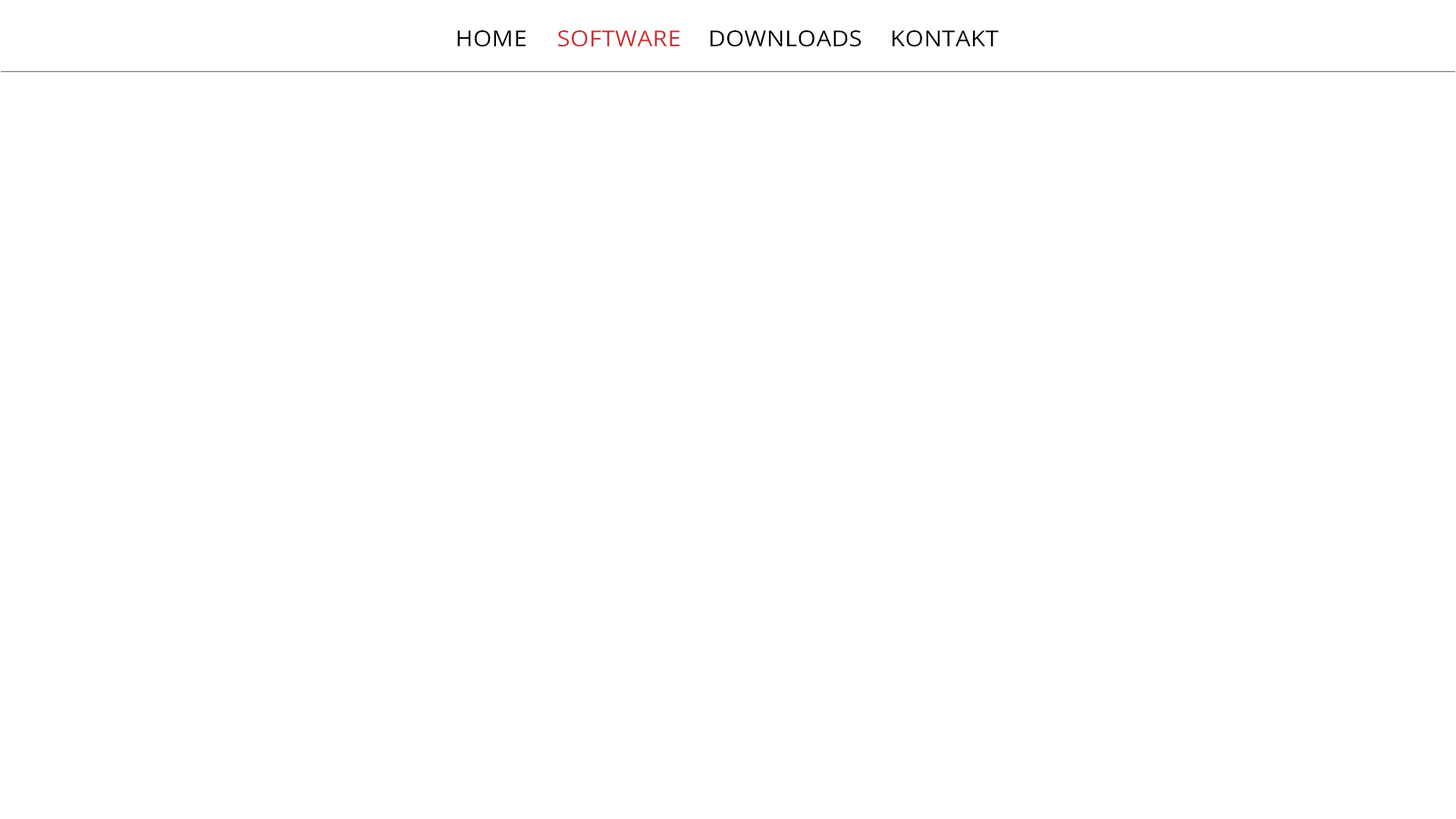
<style>
.page{position:relative;width:1456px;height:819px;background:#ffffff}
.page>*{position:absolute;margin:0}
.t1{font:22.1px "OpenSans-Regular";letter-spacing:0.01em;color:#000000;text-transform:uppercase;scale:1.08 1}
.t2{font:22.1px "OpenSans-Regular";letter-spacing:0.01em;color:#cd2f2f;text-transform:uppercase;scale:1.08 1}
</style>
<div class="page">
<p class="t1" style="left:457px;top:30px;width:69px;height:17px">Home</p>
<p class="t2" style="left:558px;top:30px;width:121px;height:17px">Software</p>
<p class="t1" style="left:711px;top:30px;width:150px;height:17px">Downloads</p>
<p class="t1" style="left:893px;top:30px;width:106px;height:17px">Kontakt</p>
</div>
